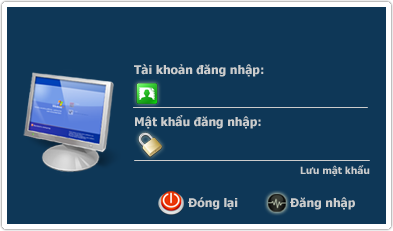
<style>
.page{position:relative;width:393px;height:231px;background:#0e3757}
.page>*{position:absolute;margin:0}
.t1{font:12px "Tahoma-Bold";color:#cccccc}
.t2{font:10px "Tahoma-Bold";color:#cccccc}
</style>
<div class="page">
<p class="t1" style="left:134px;top:64px;width:130px;height:13px">Tài khoản đăng nhập:</p>
<p class="t1" style="left:135px;top:115px;width:126px;height:14px">Mật khẩu đăng nhập:</p>
<p class="t2" style="left:300px;top:165px;width:70px;height:11px">Lưu mật khẩu</p>
<p class="t1" style="left:188px;top:197px;width:50px;height:13px">Đóng lại</p>
<p class="t1" style="left:290px;top:197px;width:65px;height:13px">Đăng nhập</p>
</div>
